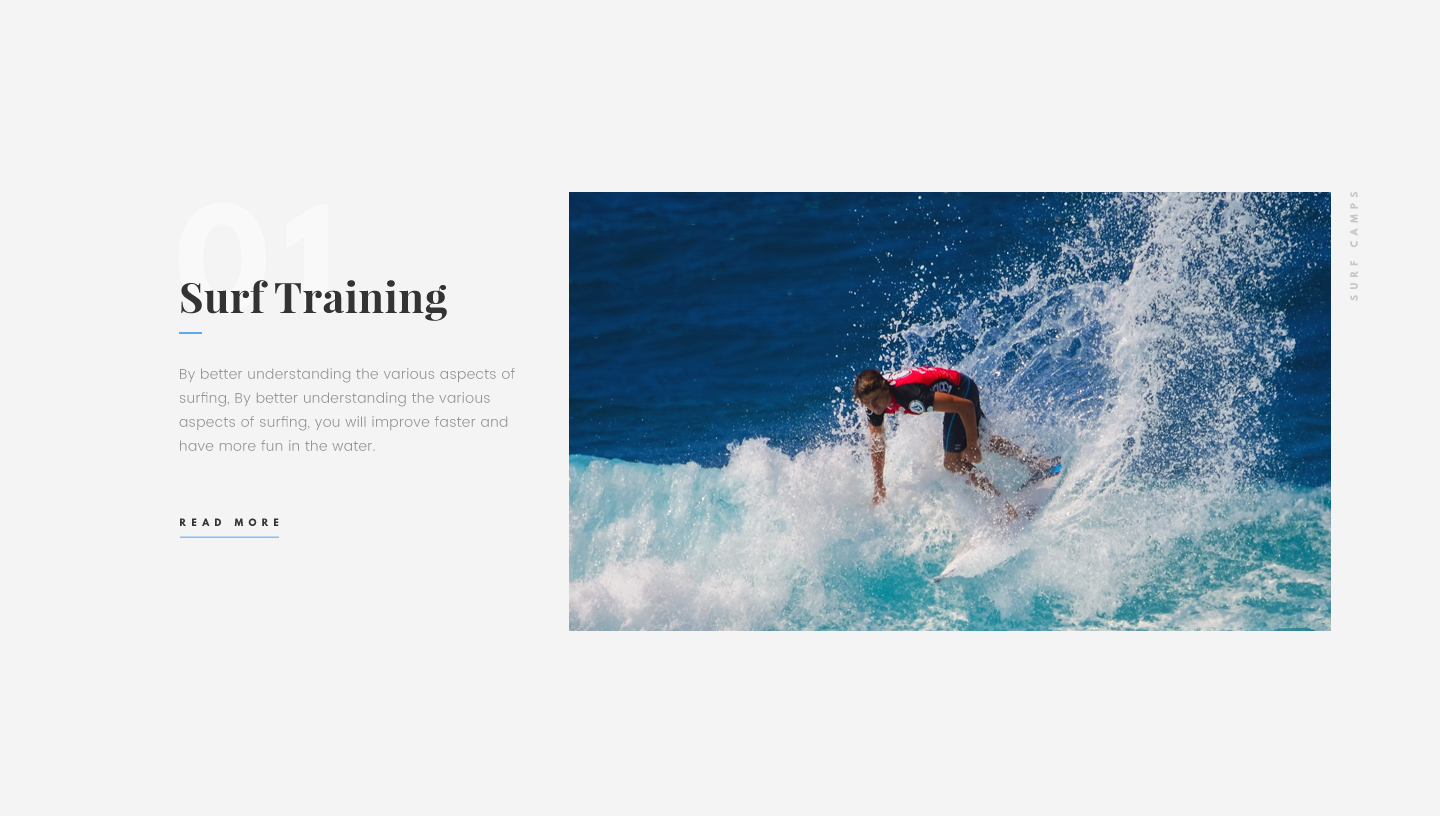
<style>
.page{position:relative;width:1440px;height:816px;background:#f5f4f4}
.page>*{position:absolute;margin:0}
.t1{font:9px "LeagueSpartan-Bold";letter-spacing:0.6em;color:#c6c6c7;text-transform:uppercase}
.t2{font:42px "PlayfairDisplay-Bold";letter-spacing:0.01em;color:#333333}
.t3{font:14px/24px "Poppins-Light";letter-spacing:0.025em;color:#959494}
.t4{font:9px "LeagueSpartan-Bold";letter-spacing:0.6em;color:#333333;text-transform:uppercase}
</style>
<div class="page">
<p class="t1" style="left:1350px;top:192px;width:8px;height:109px;rotate:-90deg">Surf Camps</p>
<p class="t2" style="left:181px;top:280px;width:266px;height:41px">Surf Training</p>
<p class="t3" style="left:179px;top:368px;width:336px;height:83px">By better understanding the various aspects of surfing, By better understanding the various aspects of surfing, you will improve faster and have more fun in the water.</p>
<p class="t4" style="left:180px;top:518px;width:99px;height:8px">Read More</p>
</div>
